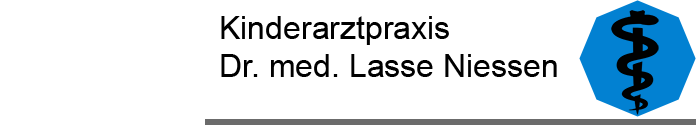
<style>
.page{position:relative;width:700px;height:125px;background:#ffffff}
.page>*{position:absolute;margin:0}
.t1{font:32px "ArialMT";color:#000000}
</style>
<div class="page">
<p class="t1" style="left:221px;top:16px;width:336px;height:61px">Kinderarztpraxis <br>Dr. med. Lasse Niessen</p>
</div>
